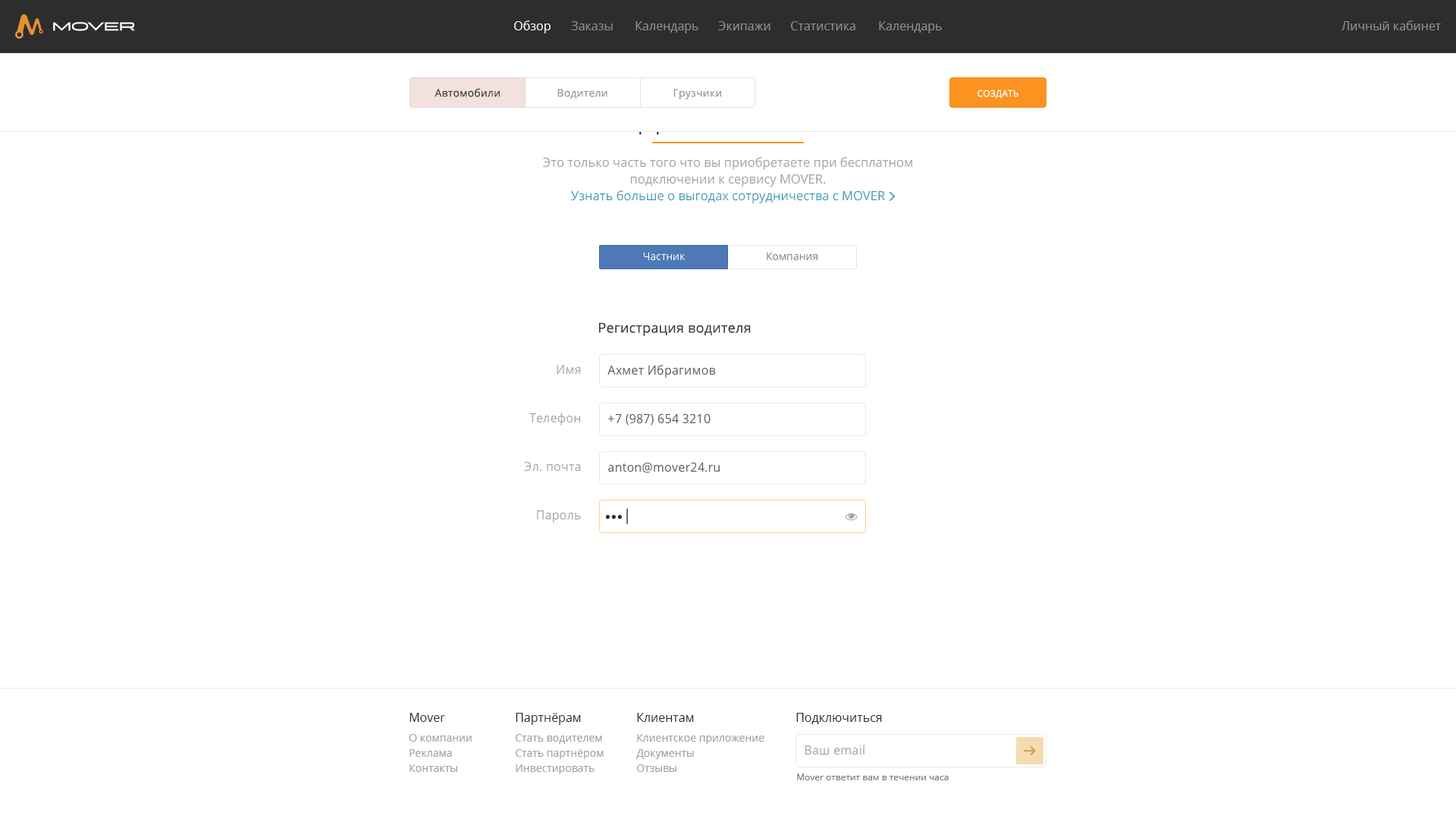
<style>
.page{position:relative;width:1456px;height:819px;background:#ffffff}
.page>*{position:absolute;margin:0}
.t1{font:12.1px "OpenSans";color:#fefefe}
.t2{font:12.1px "OpenSans";color:#8e8e8e}
.t3{font:10.6px "OpenSans";letter-spacing:0.015em;color:#414141}
.t4{font:10.6px "OpenSans";letter-spacing:0.015em;color:#9a9a9a}
.t5{font:9.1px "OpenSans";letter-spacing:0.015em;color:#ffffff;text-transform:uppercase}
.t6{font:12.7px "OpenSans";color:#a3a3a3}
.t7{font:12.7px "OpenSans";color:#439db8}
.t8{font:10.6px "OpenSans";color:#ffffff}
.t9{font:10.6px "OpenSans";color:#818181}
.t10{font:13.6px "OpenSans";letter-spacing:0.015em;color:#414141}
.t11{font:12.1px "OpenSans";letter-spacing:0.015em;color:#a3a3a3}
.t12{font:12.1px "OpenSans";letter-spacing:0.015em;color:#5c5c5c}
.t13{font:15.2px "MinionPro-Regular";letter-spacing:0.015em;color:#2d2d2d}
.t14{font:15.2px "OpenSans";letter-spacing:0.015em;color:#2d2d2d}
.t15{font:12.1px "OpenSans";color:#2d2d2d}
.t16{font:10.6px/15.2px "OpenSans";color:#a3a3a3}
.t17{font:9.1px "OpenSans";color:#7b7b7b}
</style>
<div class="page">
<p class="t1" style="left:514px;top:20px;width:37px;height:13px">Обзор</p>
<p class="t2" style="left:571px;top:21px;width:42px;height:9px">Заказы</p>
<p class="t2" style="left:635px;top:21px;width:63px;height:12px">Календарь</p>
<p class="t2" style="left:718px;top:21px;width:52px;height:9px">Экипажи</p>
<p class="t2" style="left:791px;top:21px;width:64px;height:9px">Статистика</p>
<p class="t2" style="left:879px;top:21px;width:63px;height:12px">Календарь</p>
<p class="t2" style="left:1341px;top:20px;width:100px;height:10px">Личный кабинет</p>
<p class="t3" style="left:435px;top:88px;width:65px;height:9px">Автомобили</p>
<p class="t4" style="left:557px;top:89px;width:50px;height:10px">Водители</p>
<p class="t4" style="left:673px;top:89px;width:48px;height:10px">Грузчики</p>
<p class="t5" style="left:977px;top:89px;width:41px;height:10px">Создать</p>
<p class="t6" style="left:543px;top:157px;width:369px;height:47px;text-align:center">Это только часть того что вы приобретаете при бесплатном<br>подключении к сервису MOVER.<br><span class="t7">Узнать больше о выгодах сотрудничества с MOVER</span></p>
<p class="t8" style="left:643px;top:253px;width:42px;height:8px">Частник</p>
<p class="t9" style="left:767px;top:253px;width:50px;height:8px">Компания</p>
<p class="t10" style="left:599px;top:322px;width:152px;height:15px">Регистрация водителя</p>
<p class="t11" style="left:557px;top:365px;width:24px;height:9px">Имя</p>
<p class="t12" style="left:607px;top:365px;width:109px;height:13px">Ахмет Ибрагимов</p>
<p class="t11" style="left:529px;top:413px;width:52px;height:12px">Телефон</p>
<p class="t12" style="left:608px;top:413px;width:103px;height:12px">+7 (987) 654 3210</p>
<p class="t11" style="left:524px;top:461px;width:57px;height:11px">Эл. почта</p>
<p class="t12" style="left:608px;top:462px;width:112px;height:11px">anton@mover24.ru</p>
<p class="t13" style="left:605px;top:508px;width:23px;height:16px">•••<span class="t14">|</span></p>
<p class="t11" style="left:537px;top:510px;width:44px;height:12px">Пароль</p>
<p class="t15" style="left:409px;top:713px;width:36px;height:9px">Mover</p>
<p class="t15" style="left:516px;top:713px;width:65px;height:12px">Партнёрам</p>
<p class="t15" style="left:637px;top:713px;width:57px;height:9px">Клиентам</p>
<p class="t15" style="left:796px;top:713px;width:86px;height:11px">Подключиться</p>
<p class="t16" style="left:409px;top:734px;width:63px;height:38px">О компании<br>Реклама<br>Контакты</p>
<p class="t16" style="left:516px;top:734px;width:88px;height:40px">Стать водителем<br>Стать партнёром<br>Инвестировать</p>
<p class="t16" style="left:636px;top:734px;width:128px;height:38px">Клиентское приложение<br>Документы<br>Отзывы</p>
<p class="t11" style="left:805px;top:745px;width:59px;height:10px">Ваш email</p>
<p class="t17" style="left:797px;top:773px;width:152px;height:7px">Mover ответит вам в течении часа</p>
</div>
